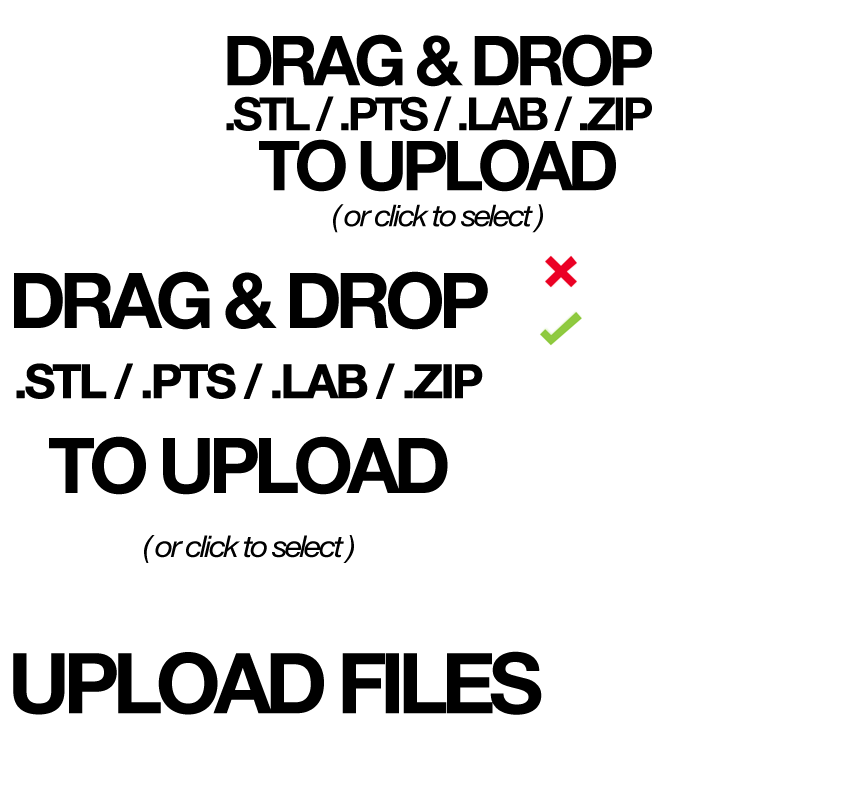
<style>
.page{position:relative;width:856px;height:812px;background:#ffffff}
.page>*{position:absolute;margin:0}
.t1{font:46px/45px "HelveticaNeue-Bold";letter-spacing:-0.08em;color:#000000}
.t2{font:69px "HelveticaNeue-Bold";letter-spacing:-0.08em;color:#000000}
.t3{font:69px/60px "HelveticaNeue-Bold";letter-spacing:-0.08em;color:#000000}
.t4{font:30px/36px "HelveticaNeue-Italic";letter-spacing:-0.08em;color:#000000;scale:1.06 1}
.t5{font:47px/70px "HelveticaNeue-Bold";letter-spacing:-0.08em;color:#000000;font-weight:bold}
.t6{font:77px "HelveticaNeue-Bold";letter-spacing:-0.08em;color:#000000}
.t7{font:77px/95px "HelveticaNeue-Bold";letter-spacing:-0.08em;color:#000000}
.t8{font:30px/64px "HelveticaNeue-Italic";letter-spacing:-0.08em;color:#000000;scale:1.06 1}
.t9{font:84px "HelveticaNeue-Bold";letter-spacing:-0.08em;color:#000000}
</style>
<div class="page">
<p class="t1" style="left:226px;top:34px;width:426px;height:199px;text-align:center"><span class="t2">DRAG &amp; DROP<br></span>.STL / .PTS / .LAB / .ZIP<br><span class="t3">TO UPLOAD<br></span><span class="t4">( or click to select )</span></p>
<p class="t5" style="left:14px;top:271px;width:474px;height:292px;text-align:center"><span class="t6">DRAG &amp; DROP<br></span>.STL / .PTS / .LAB / .ZIP<br><span class="t7">TO UPLOAD<br></span><span class="t8">( or click to select )</span></p>
<p class="t9" style="left:13px;top:651px;width:529px;height:64px">UPLOAD FILES</p>
</div>
